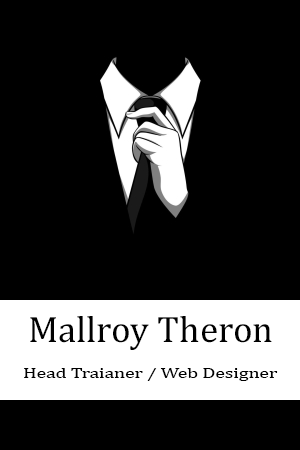
<style>
.page{position:relative;width:300px;height:450px;background:#000000}
.page>*{position:absolute;margin:0}
.t1{font:37.3px "Cambria";color:#000000}
.t2{font:15.2px "Cambria";color:#000000;scale:1.29 1}
</style>
<div class="page">
<p class="t1" style="left:30px;top:316px;width:242px;height:34px">Mallroy Theron</p>
<p class="t2" style="left:24px;top:368px;width:254px;height:13px">Head Traianer / Web Designer</p>
</div>
